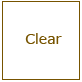
<style>
.page{position:relative;width:82px;height:82px;background:#ffffff}
.page>*{position:absolute;margin:0}
.t1{font:14px "Verdana";color:#775400}
</style>
<div class="page">
<p class="t1" style="left:25px;top:33px;width:37px;height:11px">Clear</p>
</div>
